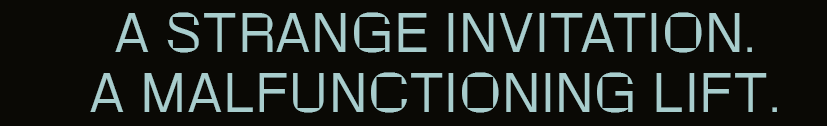
<style>
.page{position:relative;width:827px;height:126px;background:#0a0905}
.page>*{position:absolute;margin:0}
.t1{font:50.2px "RotontoTrial-Light";letter-spacing:0.05em;color:#a8cdcd;text-transform:uppercase}
</style>
<div class="page">
<p class="t1" style="left:90px;top:12px;width:687px;height:101px;text-align:center">A strange invitation. <br>A malfunctioning lift.</p>
</div>
